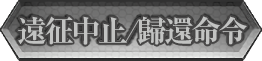
<style>
.page{position:relative;width:262px;height:61px}
.page>*{position:absolute;margin:0}
.t1{font:30px "RyuminPr6N-ExBold";letter-spacing:-0.1em;color:#c2c3c2}
</style>
<div class="page">
<p class="t1" style="left:18px;top:16px;width:229px;height:29px">遠征中止/歸還命令</p>
</div>
